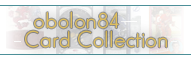
<style>
.page{position:relative;width:191px;height:60px}
.page>*{position:absolute;margin:0}
.t1{font:24px "ElegantLux-Mager";color:#ddbd5e}
</style>
<div class="page">
<p class="t1" style="left:34px;top:11px;width:85px;height:18px">obolon84</p>
<p class="t1" style="left:25px;top:30px;width:142px;height:18px">Card Collection</p>
</div>
